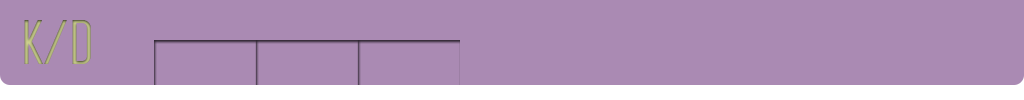
<style>
.page{position:relative;width:1024px;height:100px;background:#aa8ab3}
.page>*{position:absolute;margin:0}
.t1{font:58.3px "AgencyFB-Reg";color:#abaf77}
</style>
<div class="page">
<p class="t1" style="left:24px;top:20px;width:67px;height:44px">K/D</p>
</div>
